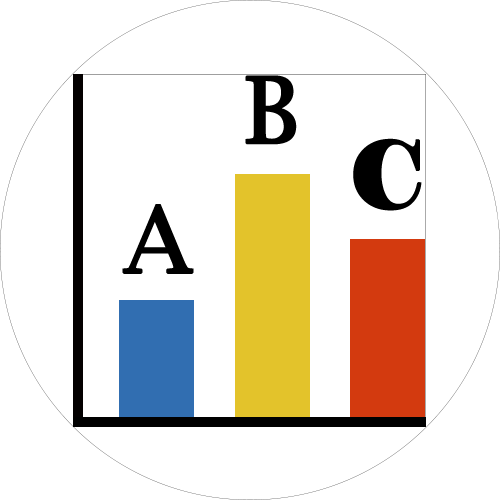
<style>
.page{position:relative;width:500px;height:500px;background:#ffffff}
.page>*{position:absolute;margin:0}
.t1{font:91.7px "LucidaBright";color:#000000;font-weight:bold}
.t2{font:91.7px "Elephant-Regular";color:#000000;font-weight:bold}
</style>
<div class="page">
<p class="t1" style="left:245px;top:75px;width:52px;height:70px">B</p>
<p class="t2" style="left:353px;top:138px;width:69px;height:73px">C</p>
<p class="t1" style="left:122px;top:204px;width:72px;height:70px">A</p>
</div>
